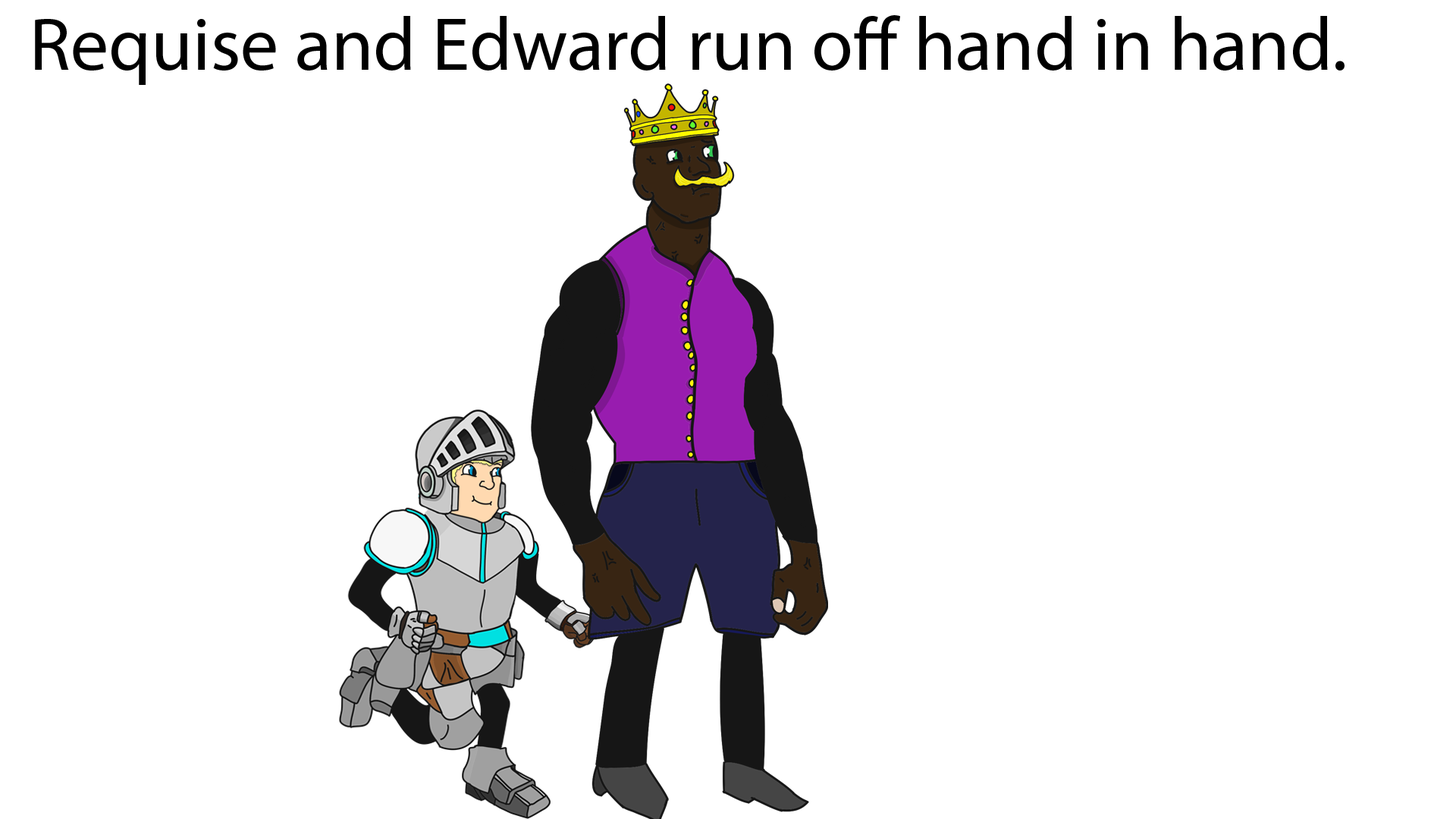
<style>
.page{position:relative;width:1456px;height:819px;background:#ffffff}
.page>*{position:absolute;margin:0}
.t1{font:75.8px "MyriadPro-Regular";color:#000000}
</style>
<div class="page">
<p class="t1" style="left:35px;top:15px;width:1310px;height:70px">Requise and Edward run off hand in hand.</p>
</div>
